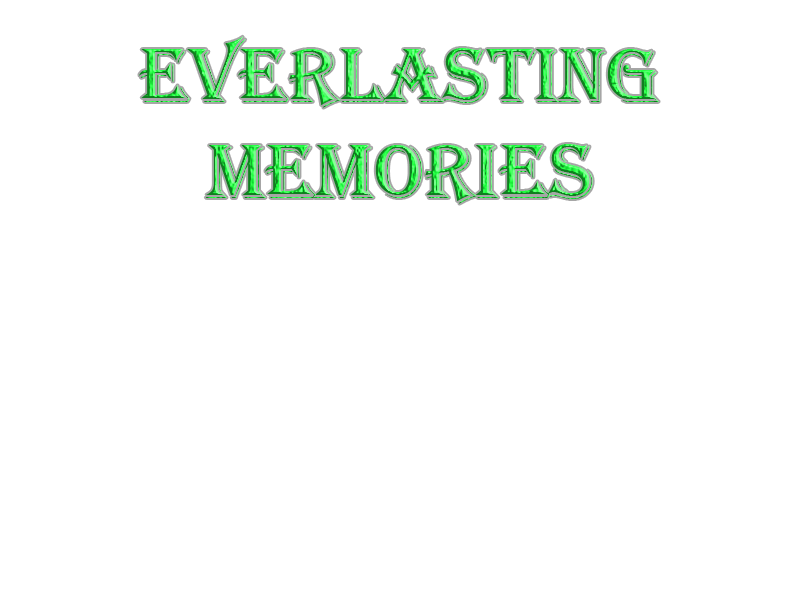
<style>
.page{position:relative;width:800px;height:600px;background:#ffffff}
.page>*{position:absolute;margin:0}
.t1{font:80px "Algerian"}
</style>
<div class="page">
<p class="t1" style="left:139px;top:36px;width:520px;height:168px;text-align:center">Everlasting<br>Memories</p>
</div>
